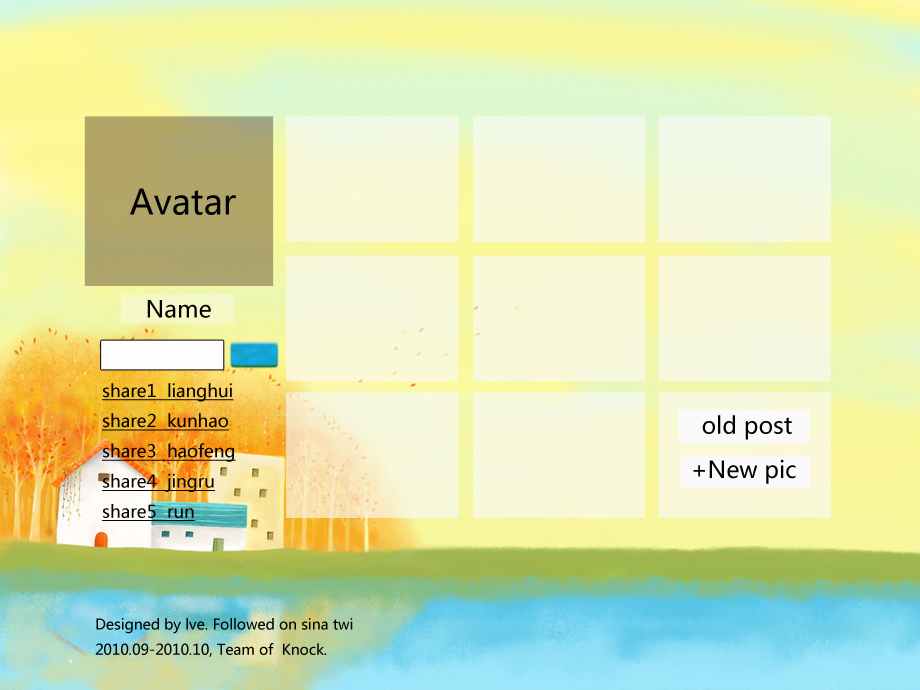
<style>
.page{position:relative;width:920px;height:690px}
.page>*{position:absolute;margin:0}
.t1{font:34.5px "MicrosoftYaHei";color:#000304}
.t2{font:23px "MicrosoftYaHei";color:#030000}
.t3{font:17.3px "MicrosoftYaHei";color:#030000;text-decoration:underline}
.t4{font:14.4px "MicrosoftYaHei";color:#000304}
</style>
<div class="page">
<p class="t1" style="left:130px;top:188px;width:106px;height:27px">Avatar</p>
<p class="t2" style="left:147px;top:300px;width:64px;height:18px">Name</p>
<p class="t3" style="left:102px;top:383px;width:134px;height:138px">share1  lianghui<br>share2  kunhao<br>share3  haofeng<br>share4  jingru<br>share5  run</p>
<p class="t2" style="left:702px;top:415px;width:90px;height:25px">old post</p>
<p class="t2" style="left:693px;top:459px;width:103px;height:25px">+New pic</p>
<p class="t4" style="left:95px;top:618px;width:258px;height:39px">Designed by lve. Followed on sina twi<br>2010.09-2010.10, Team of  Knock.</p>
</div>
